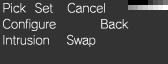
<style>
.page{position:relative;width:168px;height:64px;background:#333333}
.page>*{position:absolute;margin:0}
.t1{font:12px/16px "RodinNTLGPro-L";color:#ffffff}
.t2{font:12px/16px "RodinNTLGPro-L";letter-spacing:-0.025em;color:#ffffff}
</style>
<div class="page">
<p class="t1" style="left:3px;top:2px;width:126px;height:45px">Pick   Set    Cancel<br>Configure            Back<br>Intrusion    <span class="t2">Swap</span></p>
</div>
